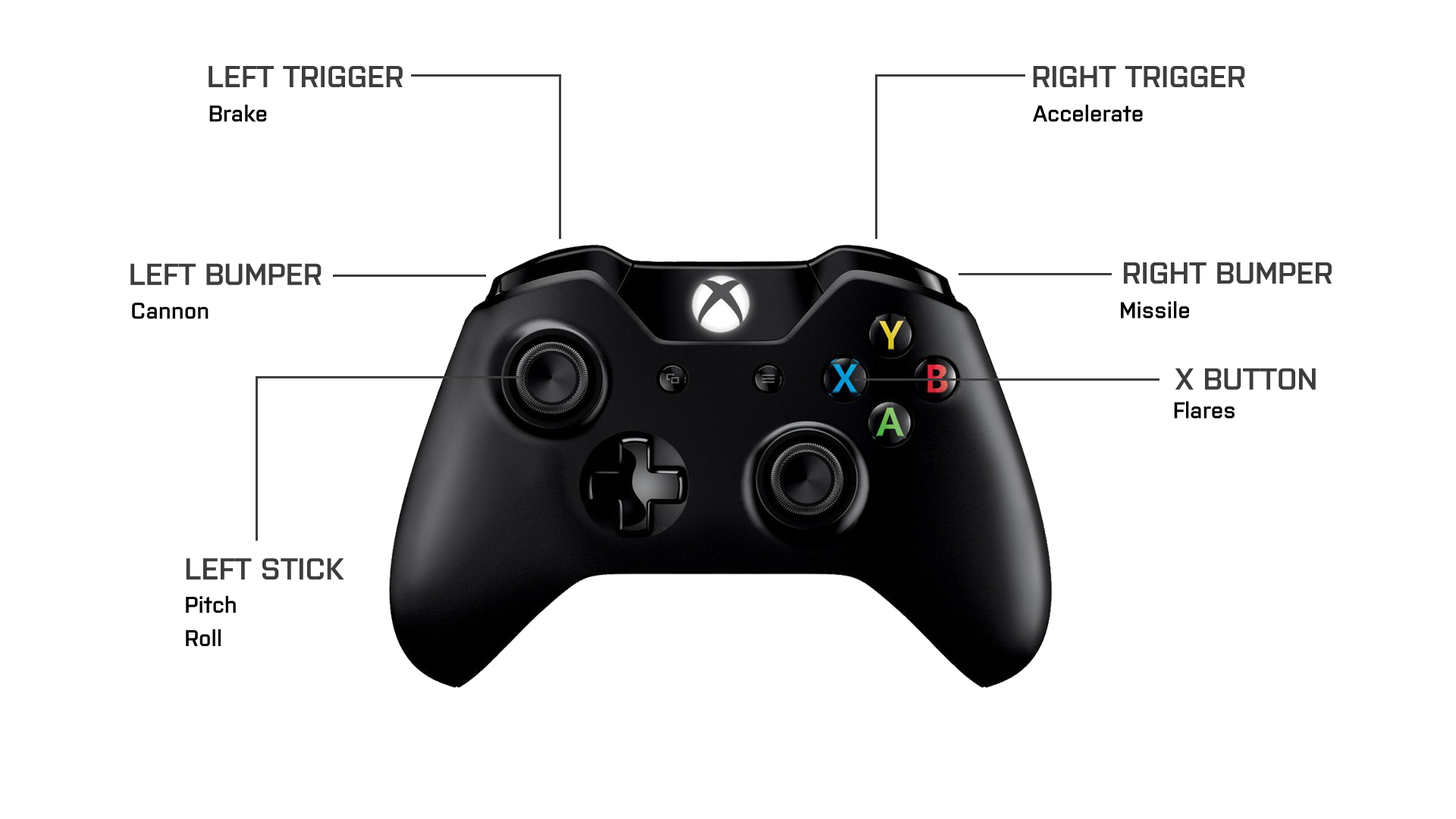
<style>
.page{position:relative;width:1456px;height:819px;background:#ffffff}
.page>*{position:absolute;margin:0}
.t1{font:30.3px "Purista-SemiBold";color:#3d3d3d}
.t2{font:22.7px "Purista-SemiBold";color:#000000}
</style>
<div class="page">
<p class="t1" style="left:209px;top:66px;width:194px;height:21px">LEFT TRIGGER</p>
<p class="t1" style="left:1033px;top:66px;width:212px;height:21px">RIGHT TRIGGER</p>
<p class="t2" style="left:209px;top:105px;width:58px;height:17px">Brake</p>
<p class="t2" style="left:1033px;top:105px;width:110px;height:17px">Accelerate</p>
<p class="t1" style="left:130px;top:263px;width:192px;height:22px">LEFT BUMPER</p>
<p class="t1" style="left:1124px;top:262px;width:208px;height:22px">RIGHT BUMPER</p>
<p class="t2" style="left:132px;top:303px;width:77px;height:16px">Cannon</p>
<p class="t2" style="left:1121px;top:301px;width:68px;height:17px">Missile</p>
<p class="t1" style="left:1175px;top:368px;width:141px;height:22px">X BUTTON</p>
<p class="t2" style="left:1174px;top:401px;width:61px;height:18px">Flares</p>
<p class="t1" style="left:186px;top:558px;width:158px;height:22px">LEFT STICK</p>
<p class="t2" style="left:186px;top:595px;width:50px;height:18px">Pitch</p>
<p class="t2" style="left:186px;top:629px;width:35px;height:17px">Roll</p>
</div>
